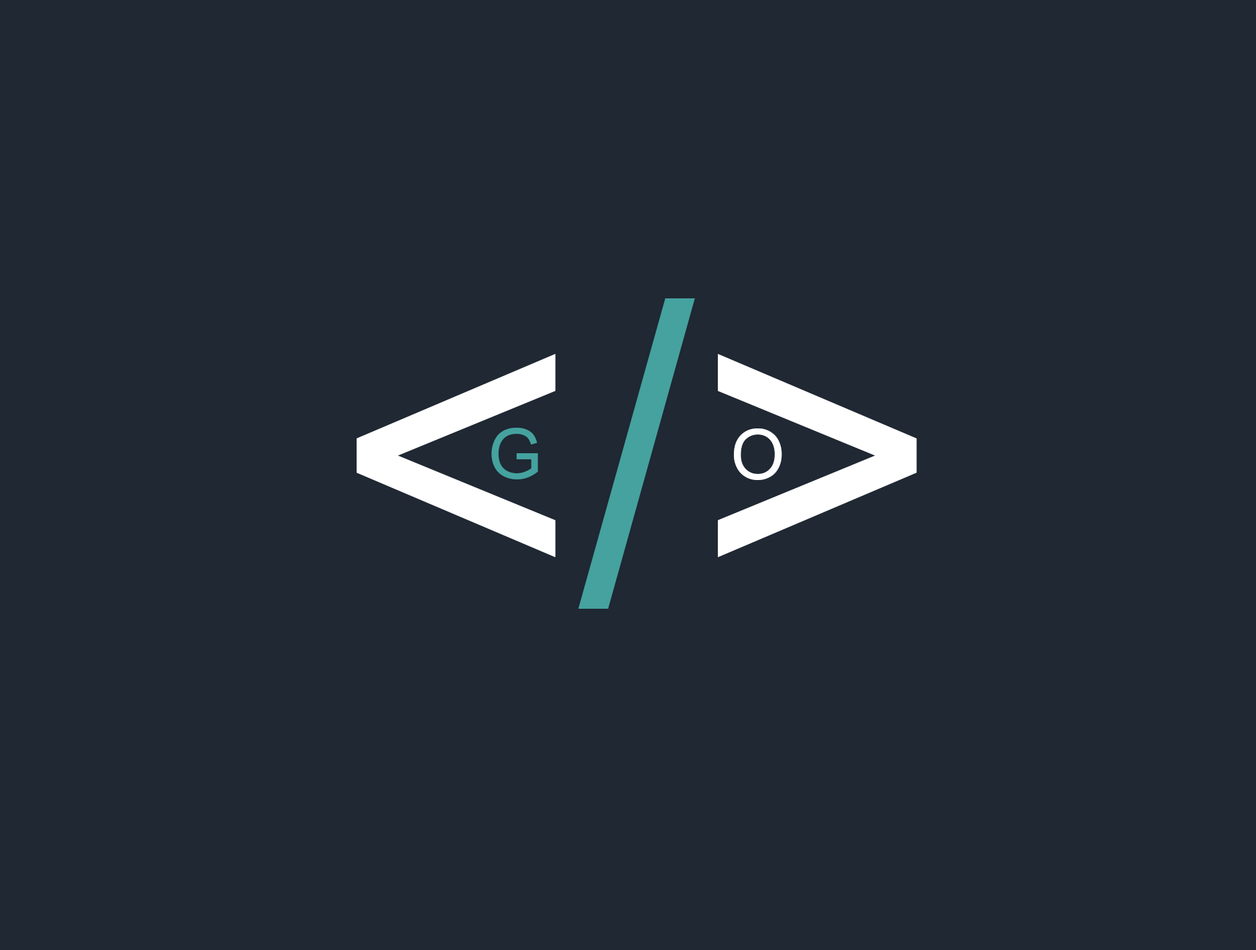
<style>
.page{position:relative;width:1256px;height:950px;background:#1f2833}
.page>*{position:absolute;margin:0}
.t1{font:418.8px "ArialMT";color:#ffffff}
.t2{font:418.8px "ArialMT";color:#45a29f}
.t3{font:69.8px "ArialMT";color:#45a29f}
.t4{font:69.8px "ArialMT";color:#ffffff}
</style>
<div class="page">
<p class="t1" style="left:356px;top:298px;width:561px;height:310px">&lt;<span class="t2">/</span>&gt;</p>
<p class="t3" style="left:491px;top:428px;width:47px;height:51px">G</p>
<p class="t4" style="left:733px;top:428px;width:49px;height:52px">O</p>
</div>
